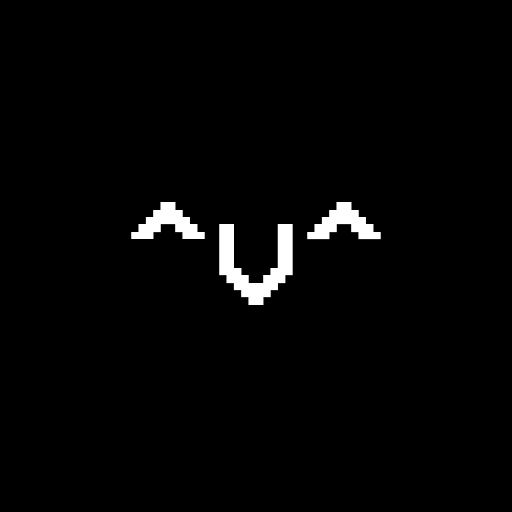
<style>
.page{position:relative;width:512px;height:512px;background:#000000}
.page>*{position:absolute;margin:0}
.t1{font:150px "VCROSDMono";color:#ffffff}
</style>
<div class="page">
<p class="t1" style="left:131px;top:202px;width:250px;height:103px">^v^</p>
</div>
